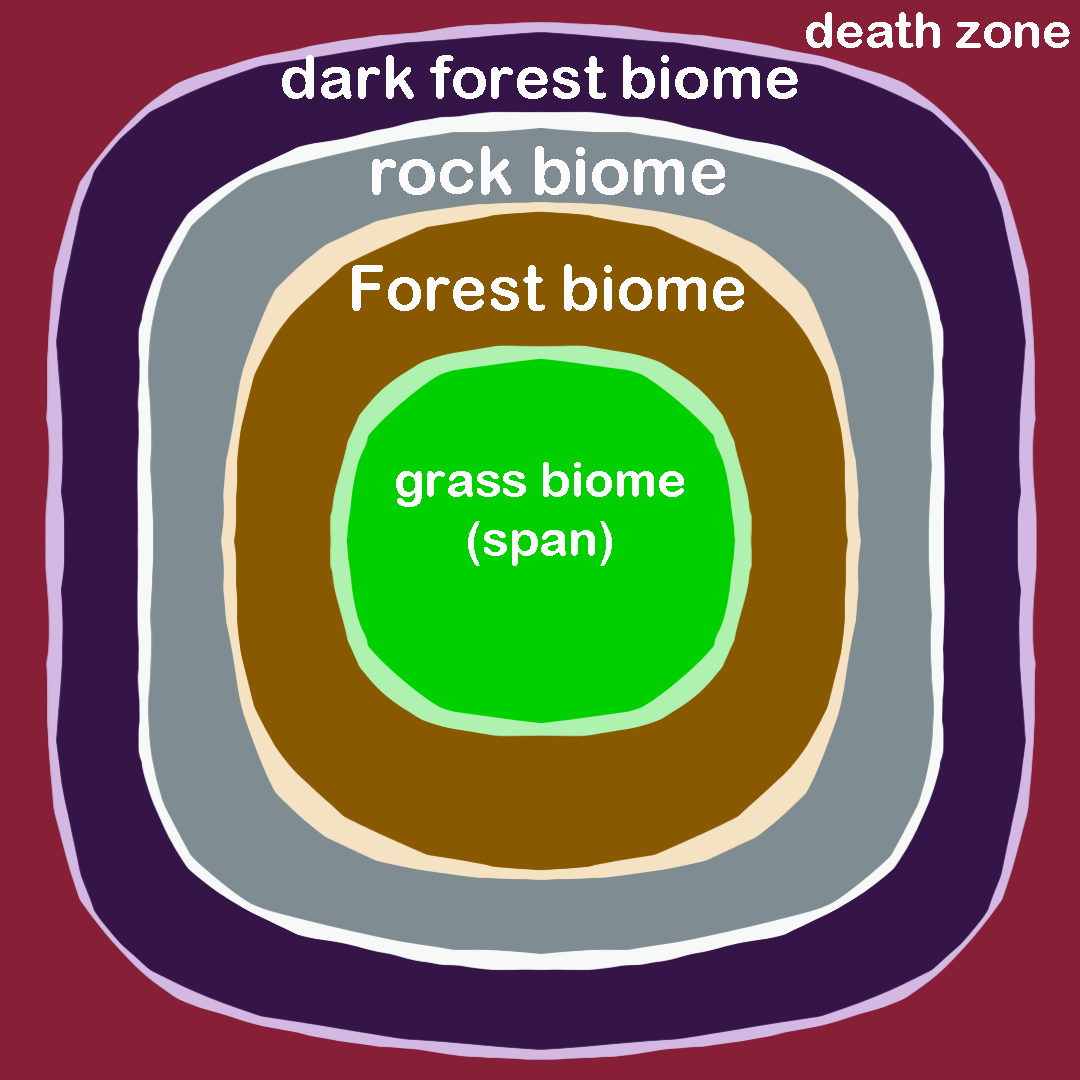
<style>
.page{position:relative;width:1080px;height:1080px;background:#351548}
.page>*{position:absolute;margin:0}
.t1{font:50.3px "ArialRoundedMTBold";color:#fcfcfc}
.t2{font:60.6px "ArialRoundedMTBold";color:#fcfcfc}
.t3{font:66.2px "ArialRoundedMTBold";color:#fcfcfc}
.t4{font:62.9px "ArialRoundedMTBold";color:#fcfcfc}
.t5{font:49px "ArialRoundedMTBold";color:#fcfcfc}
</style>
<div class="page">
<p class="t1" style="left:806px;top:12px;width:264px;height:36px">death zone</p>
<p class="t2" style="left:282px;top:55px;width:516px;height:44px">dark forest biome</p>
<p class="t3" style="left:372px;top:146px;width:353px;height:49px">rock biome</p>
<p class="t4" style="left:352px;top:264px;width:392px;height:47px">Forest biome</p>
<p class="t5" style="left:396px;top:462px;width:288px;height:104px;text-align:center">grass biome<br>(span)</p>
</div>
